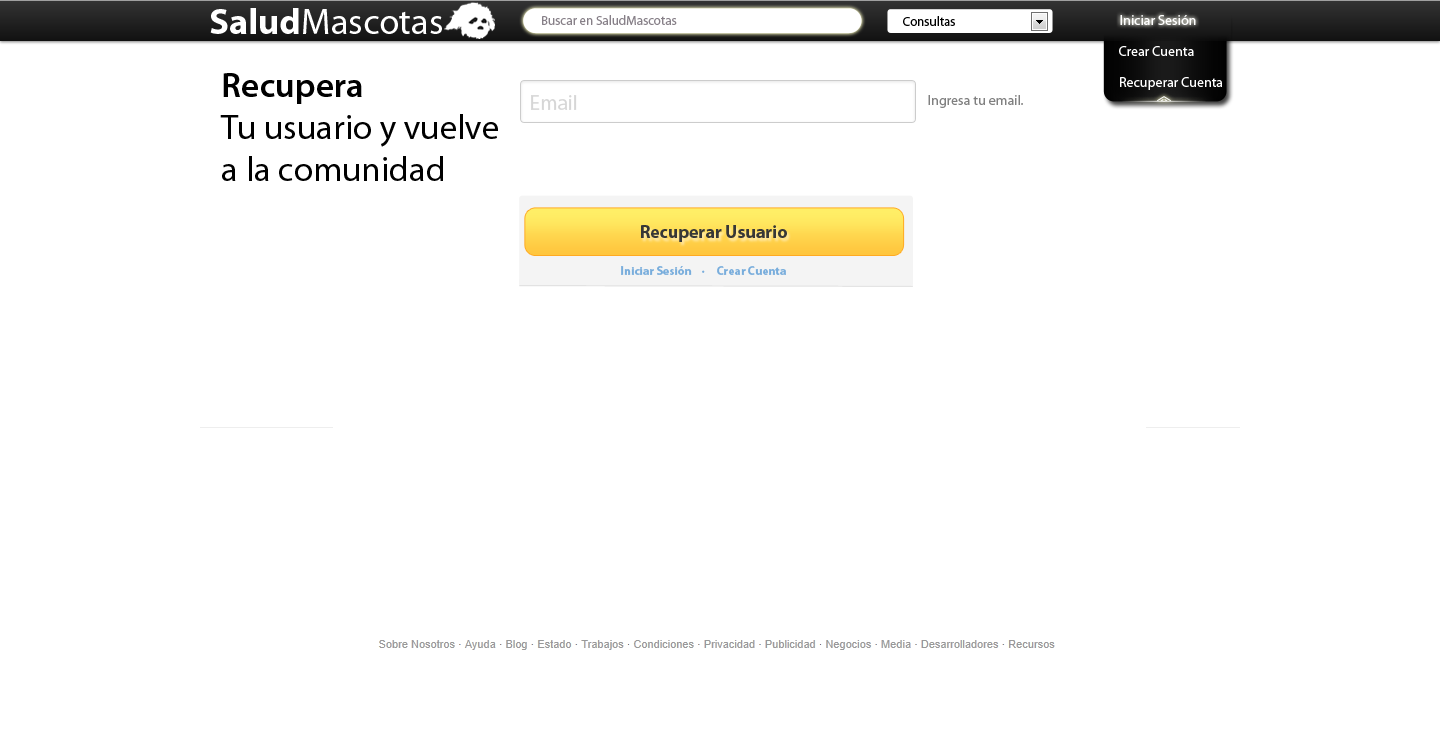
<style>
.page{position:relative;width:1440px;height:750px;background:#ffffff}
.page>*{position:absolute;margin:0}
.t1{font:36.6px "MyriadPro-Regular";color:#ffffff}
.t2{font:36.6px "MyriadPro-Bold";color:#ffffff}
.t3{font:13px "MyriadPro-Regular";color:#878088}
.t4{font:13px "MyriadPro-Regular";color:#000000}
.t5{font:14px "MyriadPro-Regular";color:#ffffff}
.t6{font:35px "MyriadPro-Regular";color:#000000}
.t7{font:35px "MyriadPro-Semibold";color:#000000}
.t8{font:21px "MyriadPro-Regular";color:#d6d6d6}
.t9{font:14px "MyriadPro-Regular";color:#808080}
.t10{font:18px "MyriadPro-Bold";color:#373737}
.t11{font:12px "MyriadPro-Bold";color:#78addc}
</style>
<div class="page">
<p class="t1" style="left:210px;top:8px;width:232px;height:26px"><span class="t2">Salud</span>Mascotas</p>
<p class="t3" style="left:542px;top:15px;width:135px;height:10px">Buscar en SaludMascotas</p>
<p class="t4" style="left:903px;top:16px;width:52px;height:10px">Consultas</p>
<p class="t5" style="left:1120px;top:15px;width:76px;height:10px">Iniciar Sesión</p>
<p class="t5" style="left:1120px;top:15px;width:76px;height:10px">Iniciar Sesión</p>
<p class="t5" style="left:1119px;top:46px;width:75px;height:10px">Crear Cuenta</p>
<p class="t6" style="left:220px;top:73px;width:278px;height:108px"><span class="t7">Recupera<br></span>Tu usuario y vuelve<br>a la comunidad</p>
<p class="t5" style="left:1120px;top:77px;width:102px;height:13px">Recuperar Cuenta</p>
<p class="t8" style="left:531px;top:95px;width:46px;height:15px">Email</p>
<p class="t9" style="left:928px;top:95px;width:95px;height:13px">Ingresa tu email.</p>
<p class="t10" style="left:641px;top:225px;width:146px;height:17px">Recuperar Usuario</p>
<p class="t11" style="left:621px;top:266px;width:165px;height:9px">Iniciar Sesión    ·     Crear Cuenta</p>
</div>
